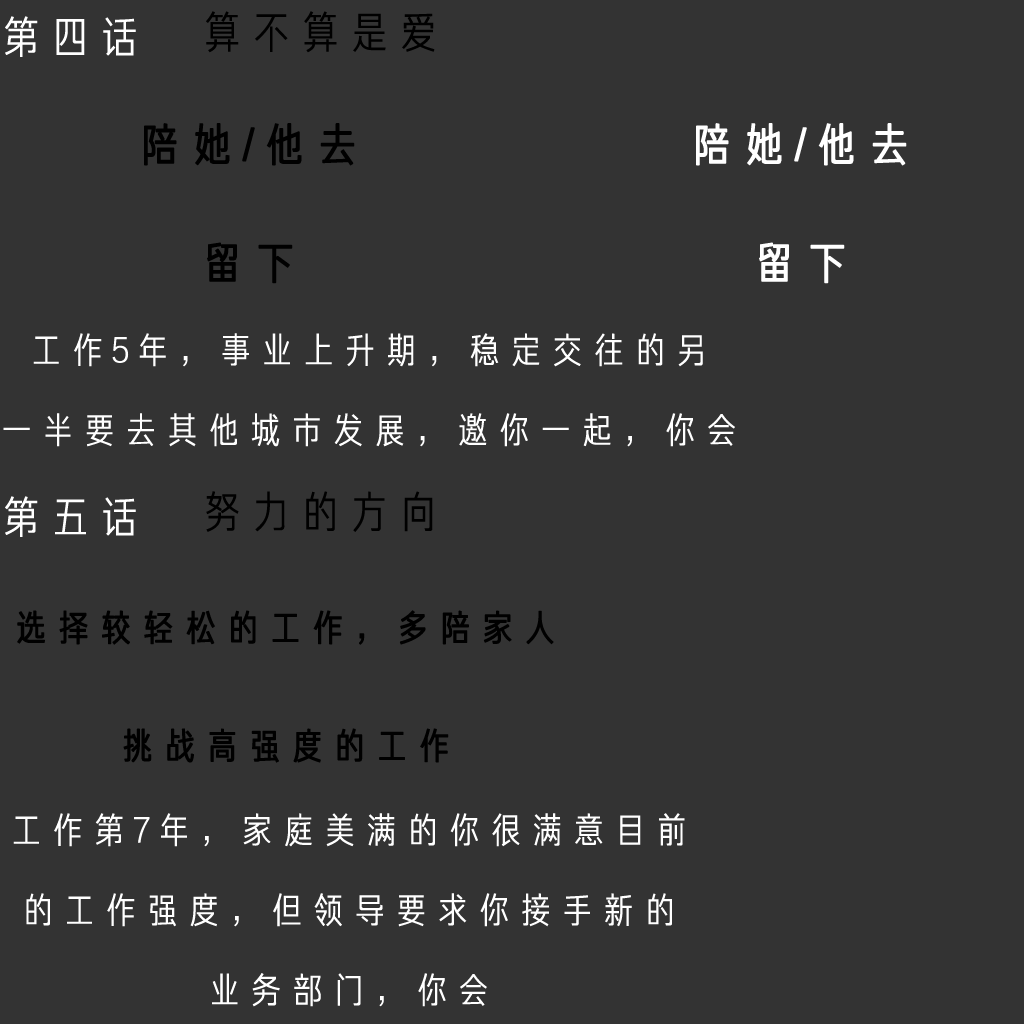
<style>
.page{position:relative;width:1024px;height:1024px;background:#333333}
.page>*{position:absolute;margin:0}
.t1{font:44.4px "FZJHJW--GB1-0";letter-spacing:0.123em;color:#ffffff}
.t2{font:44.4px "FZJHJW--GB1-0";letter-spacing:0.123em;color:#000000}
.t3{font:45.2px "FZJHJW--GB1-0";letter-spacing:0.151em;color:#000000;font-weight:bold}
.t4{font:45.2px "FZJHJW--GB1-0";letter-spacing:0.151em;color:#ffffff;font-weight:bold}
.t5{font:36px/80px "FZJHJW--GB1-0";letter-spacing:0.152em;color:#ffffff}
.t6{font:36.2px "FZJHJW--GB1-0";letter-spacing:0.151em;color:#000000;font-weight:bold}
</style>
<div class="page">
<p class="t1" style="left:5px;top:16px;width:131px;height:41px">第四话</p>
<p class="t2" style="left:206px;top:11px;width:229px;height:42px">算不算是爱</p>
<p class="t3" style="left:144px;top:123px;width:211px;height:43px">陪她/他去</p>
<p class="t4" style="left:696px;top:123px;width:211px;height:43px">陪她/他去</p>
<p class="t3" style="left:207px;top:242px;width:86px;height:42px">留下</p>
<p class="t4" style="left:759px;top:242px;width:86px;height:42px">留下</p>
<p class="t5" style="left:3px;top:333px;width:732px;height:114px;text-align:center">工作5年，事业上升期，稳定交往的另<br>一半要去其他城市发展，邀你一起，你会</p>
<p class="t1" style="left:5px;top:496px;width:131px;height:41px">第五话</p>
<p class="t2" style="left:206px;top:491px;width:227px;height:41px">努力的方向</p>
<p class="t6" style="left:17px;top:610px;width:537px;height:35px">选择较轻松的工作，多陪家人</p>
<p class="t6" style="left:123px;top:728px;width:326px;height:35px">挑战高强度的工作</p>
<p class="t5" style="left:13px;top:813px;width:672px;height:194px;text-align:center">工作第7年，家庭美满的你很满意目前<br>的工作强度，但领导要求你接手新的<br>业务部门，你会</p>
</div>
